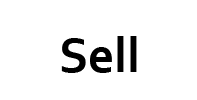
<style>
.page{position:relative;width:197px;height:100px;background:#ffffff}
.page>*{position:absolute;margin:0}
.t1{font:50.8px "Corbel-Bold";color:#000000}
</style>
<div class="page">
<p class="t1" style="left:61px;top:36px;width:76px;height:37px">Sell</p>
</div>
